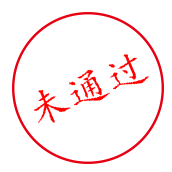
<style>
.page{position:relative;width:172px;height:172px;background:#ffffff}
.page>*{position:absolute;margin:0}
.t1{font:39.8px "¿¬Ìå";color:#ff0000;scale:1.05 1}
</style>
<div class="page">
<p class="t1" style="left:34px;top:54px;width:115px;height:69px;rotate:-24deg">未通过</p>
</div>
